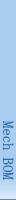
<style>
.page{position:relative;width:16px;height:200px;background:#a9cdef}
.page>*{position:absolute;margin:0}
.t1{font:14.7px "SimSun";color:#2b67aa}
</style>
<div class="page">
<p class="t1" style="left:3px;top:121px;width:11px;height:59px">Mech BOM</p>
</div>
